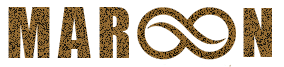
<style>
.page{position:relative;width:284px;height:67px;background:#ffffff}
.page>*{position:absolute;margin:0}
.t1{font:63.6px "Impact";letter-spacing:0.1em}
.t2{font:61.9px "Impact";letter-spacing:0.075em}
</style>
<div class="page">
<p class="t1" style="left:8px;top:7px;width:121px;height:51px">MAR</p>
<p class="t2" style="left:243px;top:8px;width:29px;height:49px">N</p>
</div>
